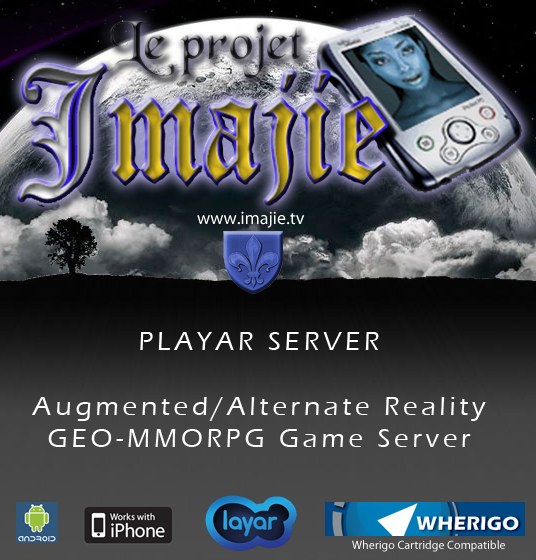
<style>
.page{position:relative;width:536px;height:560px}
.page>*{position:absolute;margin:0}
.t1{font:18px "MyriadPro-Regular";color:#ffffff}
.t2{font:27px "ErasITC-Medium";letter-spacing:0.145em;color:#ffffff}
.t3{font:12px "MyriadPro-Regular";color:#ffffff}
</style>
<div class="page">
<p class="t1" style="left:197px;top:211px;width:108px;height:17px">www.imajie.tv</p>
<p class="t2" style="left:32px;top:332px;width:454px;height:115px;text-align:center">PLAYAR SERVER<br><br>Augmented/Alternate Reality<br>GEO-MMORPG Game Server</p>
<p class="t3" style="left:352px;top:540px;width:153px;height:12px">Wherigo Cartridge Compatible</p>
</div>
